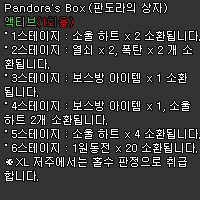
<style>
.page{position:relative;width:200px;height:200px;background:#333333}
.page>*{position:absolute;margin:0}
.t1{font:11px/14px "Dotum";color:#ffffff}
.t2{font:11px/14px "Dotum";color:#56c45b}
.t3{font:11px/14px "Dotum";color:#be0b0f}
</style>
<div class="page">
<p class="t1" style="left:4px;top:3px;width:196px;height:178px">Pandora's Box (판도라의 상자)<br><span class="t2">액티브</span><span class="t3">(1회용)<br></span>˚ 1스테이지 : 소울 하트 x 2 소환됩니다.<br>˚ 2스테이지 : 열쇠 x 2, 폭탄 x 2 개 소<br>환됩니다.<br>˚ 3스테이지 : 보스방 아이템 x 1 소환<br>됩니다.<br>˚ 4스테이지 : 보스방 아이템 x 1, 소울<br>하트 2개 소환됩니다.<br>˚ 5스테이지 : 소울 하트 x 4 소환됩니다.<br>˚ 6스테이지 : 1원동전 x 20 소환됩니다.<br>※XL 저주에서는 홀수 판정으로 취급<br>합니다.</p>
</div>
